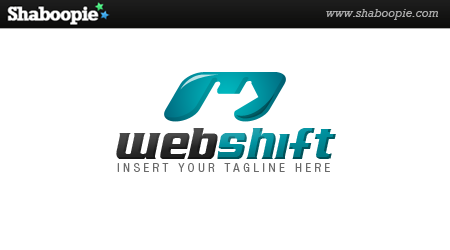
<style>
.page{position:relative;width:450px;height:250px;background:#ffffff}
.page>*{position:absolute;margin:0}
.t1{font:75px "AirMillhouseItalic";color:#0093a1}
.t2{font:75px "AirMillhouseItalic";color:#242424}
.t3{font:12.5px "HelveticaNeueLTStd-LtCn";letter-spacing:0.3em;color:#6a6a6a;text-transform:uppercase}
</style>
<div class="page">
<p class="t1" style="left:116px;top:128px;width:220px;height:31px"><span class="t2">web</span>shift</p>
<p class="t3" style="left:117px;top:163px;width:213px;height:9px">INSERT YOUR TAGLINE HERE</p>
</div>
